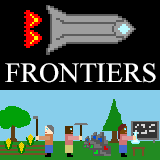
<style>
.page{position:relative;width:160px;height:160px;background:#000000}
.page>*{position:absolute;margin:0}
.t1{font:28px "TimesNewRomanPSMT";color:#ffffff}
</style>
<div class="page">
<p class="t1" style="left:5px;top:63px;width:151px;height:20px">FRONTIERS</p>
</div>
